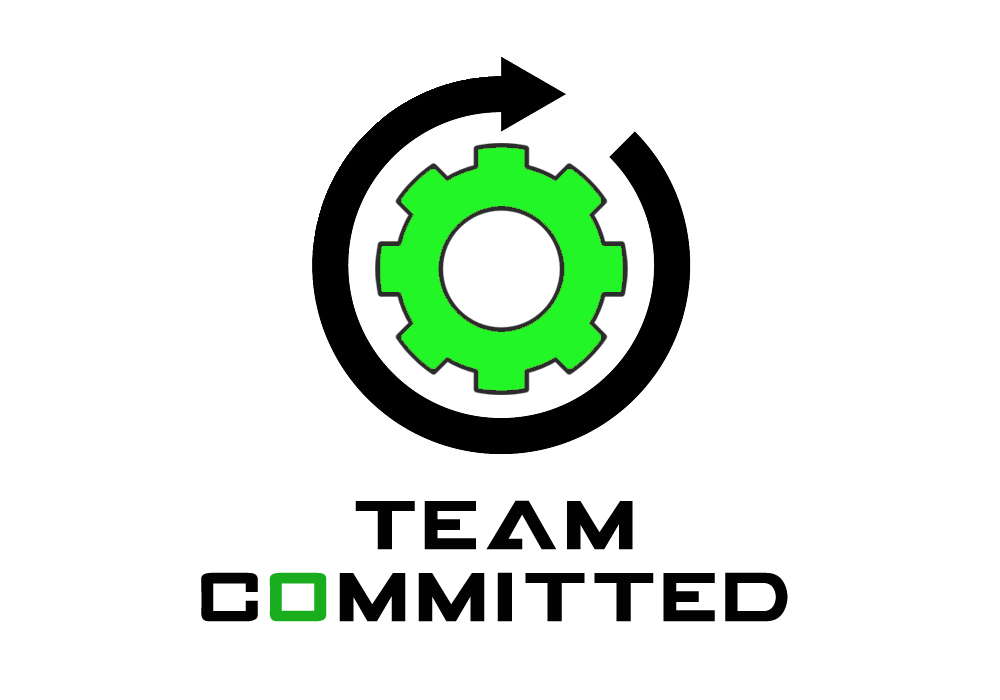
<style>
.page{position:relative;width:1000px;height:700px;background:#ffffff}
.page>*{position:absolute;margin:0}
.t1{font:60px "GAMECUBENDualSet";color:#020202}
.t2{font:60px "GAMECUBENDualSet";color:#1aad1d}
</style>
<div class="page">
<p class="t1" style="left:201px;top:500px;width:587px;height:122px;text-align:center">TEAM <br>C<span class="t2">O</span>MMITTED</p>
</div>
